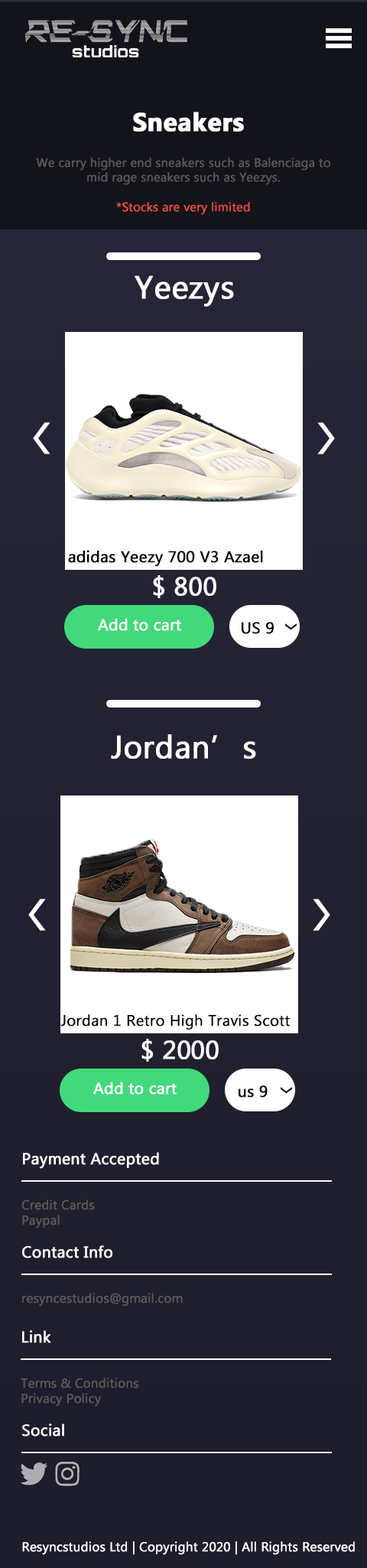
<style>
.page{position:relative;width:367px;height:1568px}
.page>*{position:absolute;margin:0}
.t1{font:25.5px "MicrosoftTaiLe-Bold";color:#ffffff;font-weight:bold}
.t2{font:12.2px "MicrosoftTaiLe";color:#595959;font-weight:bold}
.t3{font:12.2px "MicrosoftTaiLe";color:#e64c3c;font-weight:bold}
.t4{font:31.9px "MicrosoftTaiLe";color:#ffffff;font-weight:bold}
.t5{font:15.9px "MicrosoftTaiLe";color:#000000;font-weight:bold}
.t6{font:25.5px "MicrosoftTaiLe";color:#ffffff;font-weight:bold}
.t7{font:15.9px "MicrosoftTaiLe";color:#ffffff;font-weight:bold}
.t8{font:15.3px "MicrosoftTaiLe";color:#000000;font-weight:bold}
.t9{font:12.7px "MicrosoftTaiLe";color:#595959;font-weight:bold}
.t10{font:12.7px "MicrosoftTaiLe";color:#ffffff;font-weight:bold}
</style>
<div class="page">
<p class="t1" style="left:133px;top:112px;width:111px;height:20px">Sneakers</p>
<p class="t2" style="left:36px;top:158px;width:294px;height:57px;text-align:center">We carry higher end sneakers such as Balenciaga to mid rage sneakers such as Yeezys.<br><br><span class="t3">*Stocks are very limited</span></p>
<p class="t4" style="left:135px;top:275px;width:99px;height:32px">Yeezys</p>
<p class="t5" style="left:68px;top:550px;width:195px;height:17px">adidas Yeezy 700 V3 Azael</p>
<p class="t6" style="left:153px;top:575px;width:63px;height:23px">$ 800</p>
<p class="t7" style="left:98px;top:618px;width:83px;height:13px">Add to cart</p>
<p class="t5" style="left:242px;top:622px;width:32px;height:12px">US 9</p>
<p class="t4" style="left:111px;top:734px;width:145px;height:25px">Jordan’s</p>
<p class="t8" style="left:60px;top:1014px;width:230px;height:16px">Jordan 1 Retro High Travis Scott</p>
<p class="t6" style="left:142px;top:1039px;width:77px;height:23px">$ 2000</p>
<p class="t7" style="left:93px;top:1082px;width:84px;height:13px">Add to cart</p>
<p class="t5" style="left:239px;top:1085px;width:29px;height:13px">us 9</p>
<p class="t7" style="left:23px;top:1152px;width:136px;height:17px">Payment Accepted</p>
<p class="t9" style="left:21px;top:1199px;width:74px;height:29px">Credit Cards<br>Paypal</p>
<p class="t7" style="left:22px;top:1245px;width:90px;height:13px">Contact Info</p>
<p class="t9" style="left:22px;top:1293px;width:161px;height:13px">resyncestudios@gmail.com</p>
<p class="t7" style="left:22px;top:1330px;width:29px;height:13px">Link</p>
<p class="t9" style="left:21px;top:1378px;width:117px;height:29px">Terms &amp; Conditions<br>Privacy Policy</p>
<p class="t7" style="left:22px;top:1423px;width:42px;height:13px">Social</p>
<p class="t10" style="left:22px;top:1541px;width:333px;height:14px">Resyncstudios Ltd | Copyright 2020 | All Rights Reserved</p>
</div>
